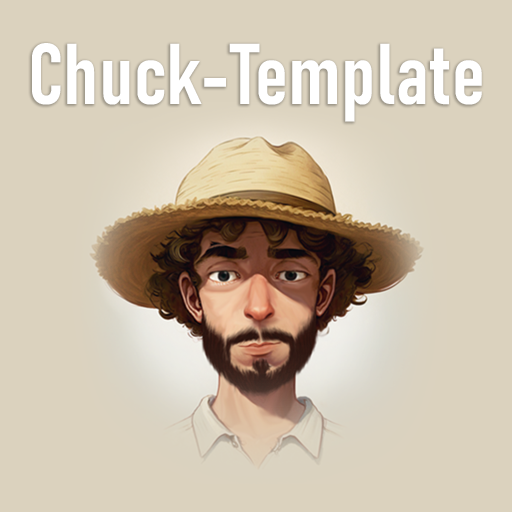
<style>
.page{position:relative;width:512px;height:512px;background:#dbd2be}
.page>*{position:absolute;margin:0}
.t1{font:85px "Bahnschrift-SemiBoldCondensed";color:#ffffff;font-weight:bold}
</style>
<div class="page">
<p class="t1" style="left:32px;top:43px;width:450px;height:79px">Chuck-Template</p>
</div>
